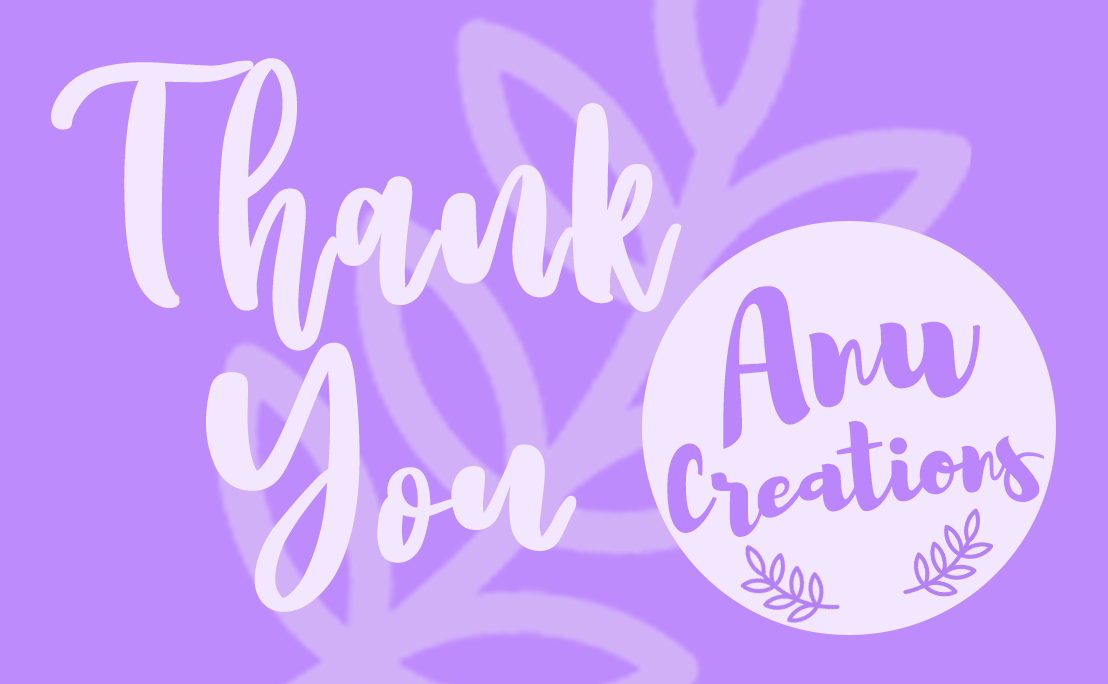
<style>
.page{position:relative;width:1108px;height:684px;background:#be8bfc}
.page>*{position:absolute;margin:0}
.t1{font:373.5px "ColoradoRegular";color:#f2e7fe;font-weight:bold;scale:0.8 1}
.t2{font:176.4px "Brusher-Regular";color:#bb86fc;font-weight:bold}
.t3{font:336.2px "ColoradoRegular";color:#f2e7fe;font-weight:bold;scale:0.86 1}
.t4{font:109.4px "Brusher-Regular";letter-spacing:-0.03em;color:#bb86fc;font-weight:bold}
</style>
<div class="page">
<p class="t1" style="left:51px;top:58px;width:631px;height:293px;rotate:-2deg">Thank</p>
<p class="t2" style="left:723px;top:286px;width:257px;height:163px;rotate:-10deg">Anu</p>
<p class="t3" style="left:206px;top:342px;width:371px;height:270px;rotate:-2deg">You</p>
<p class="t4" style="left:667px;top:421px;width:378px;height:116px;rotate:-7deg">Creations</p>
</div>
